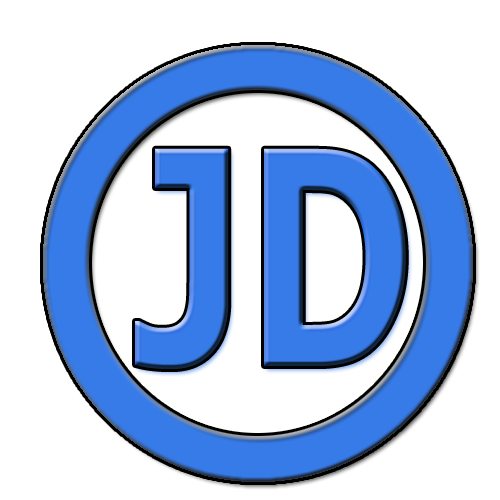
<style>
.page{position:relative;width:500px;height:500px;background:#ffffff}
.page>*{position:absolute;margin:0}
.t1{font:297.7px "Verdana-Bold";color:#377be8;scale:0.69 1}
</style>
<div class="page">
<p class="t1" style="left:135px;top:148px;width:271px;height:221px">JD</p>
</div>
